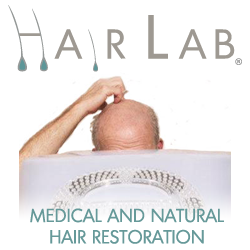
<style>
.page{position:relative;width:250px;height:250px;background:#ffffff}
.page>*{position:absolute;margin:0}
.t1{font:18.4px/21.4px "Montreal-Regular";letter-spacing:0.025em;color:#669999}
</style>
<div class="page">
<p class="t1" style="left:30px;top:208px;width:194px;height:36px;text-align:center">MEDICAL AND NATURAL<br>HAIR RESTORATION</p>
</div>
